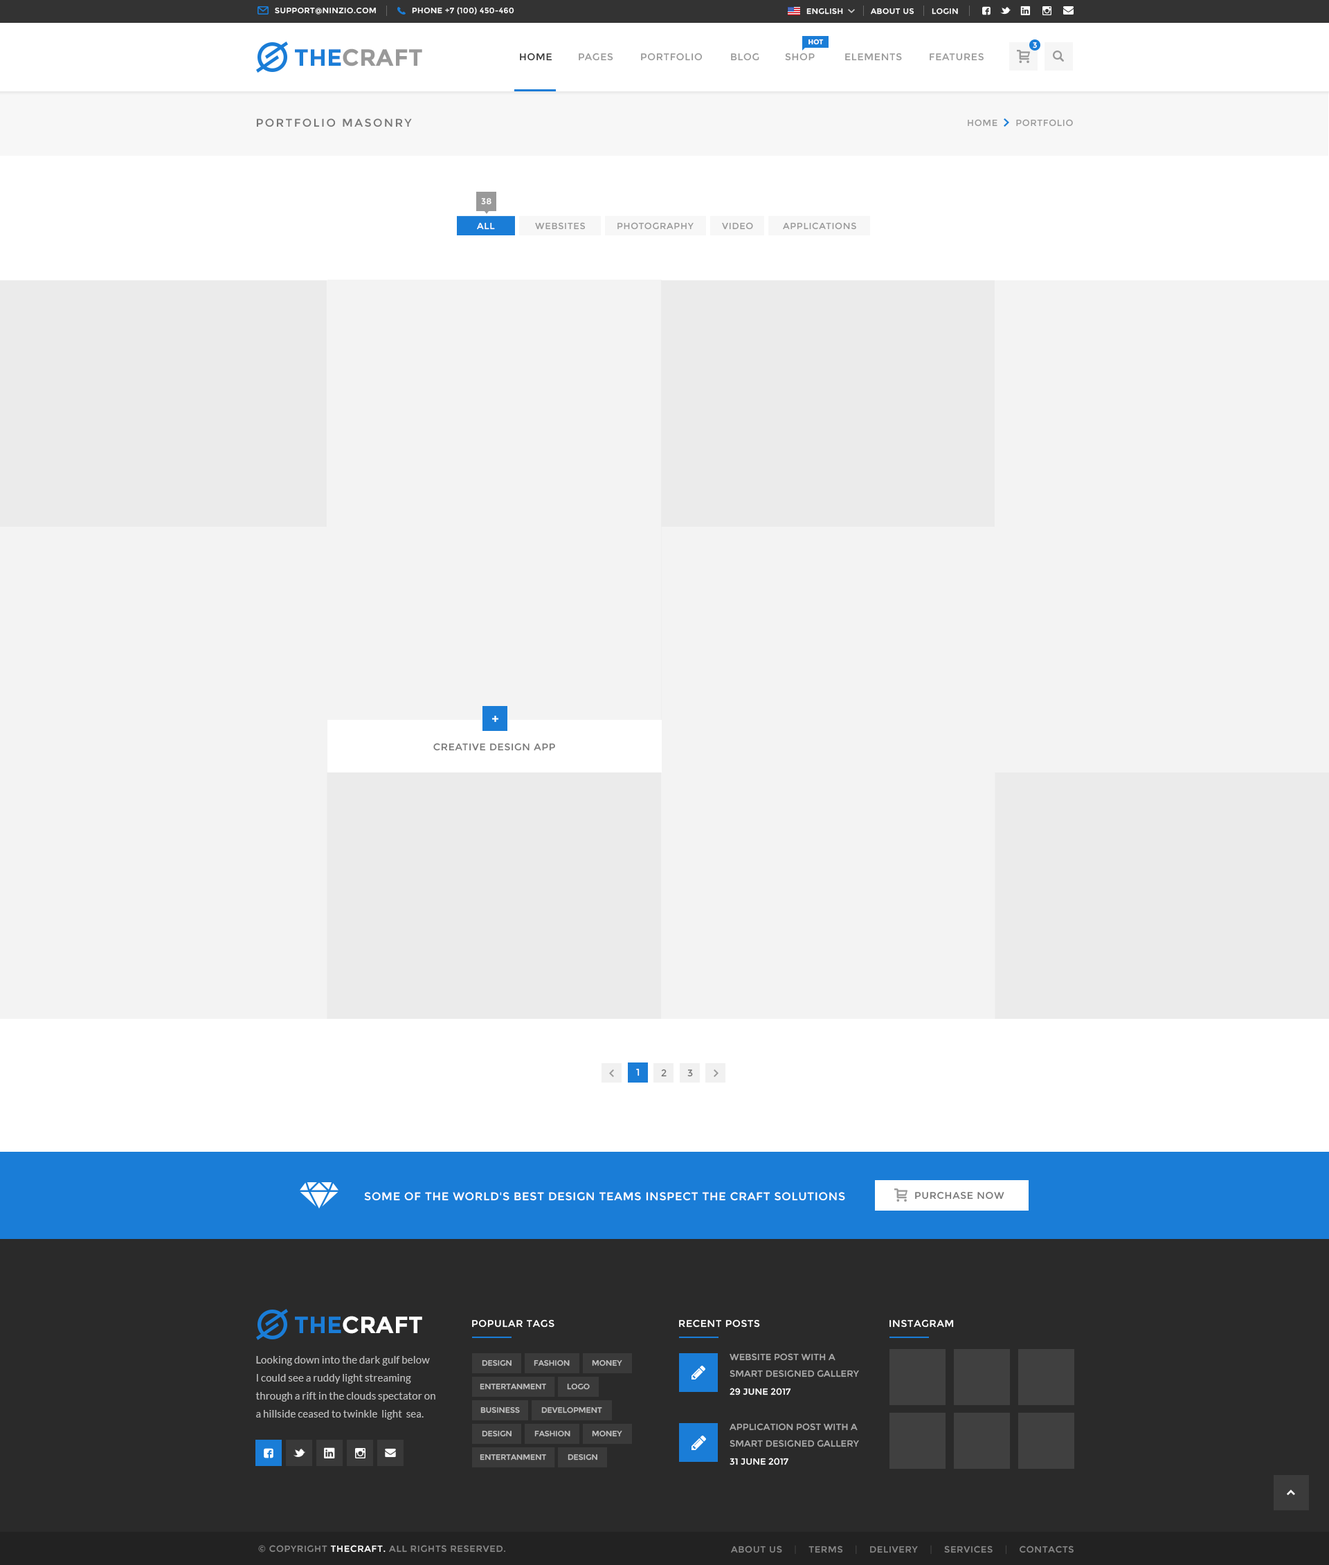
<style>
.page{position:relative;width:1329px;height:1565px;background:#f3f3f3}
.page>*{position:absolute;margin:0}
.t1{font:7.6px "Montserrat-Regular";letter-spacing:0.05em;color:#ffffff;text-transform:uppercase}
.t2{font:6.9px "Montserrat-Bold";color:#ffffff;text-transform:uppercase}
.t3{font:23.5px "Montserrat-Bold";color:#999999;text-transform:uppercase}
.t4{font:23.5px "Montserrat-Bold";color:#1a7dd7;text-transform:uppercase}
.t5{font:9.7px "Montserrat-Regular";letter-spacing:0.05em;color:#333333;text-transform:uppercase}
.t6{font:9.7px "Montserrat-Regular";letter-spacing:0.05em;color:#999999;text-transform:uppercase}
.t7{font:11.1px "Montserrat-Regular";letter-spacing:0.15em;color:#777777;text-transform:uppercase}
.t8{font:9px "Montserrat-Regular";letter-spacing:0.05em;color:#999999;text-transform:uppercase}
.t9{font:8.3px "Montserrat-Regular";letter-spacing:0.05em;color:#ffffff;text-transform:uppercase}
.t10{font:9px "Montserrat-Regular";letter-spacing:0.05em;color:#ffffff;text-transform:uppercase}
.t11{font:9.7px "Montserrat-Regular";letter-spacing:0.05em;color:#777777;text-transform:uppercase}
.t12{font:9.7px "Montserrat-Regular";letter-spacing:0.05em;color:#ffffff;text-transform:uppercase}
.t13{font:11.1px "Montserrat-Regular";letter-spacing:0.05em;color:#ffffff;text-transform:uppercase}
.t14{font:23.5px "Montserrat-Bold";color:#ffffff;text-transform:uppercase}
.t15{font:10.4px/18px "Lato-Regular";color:#bdbdbd}
.t16{font:7.6px "Montserrat-Regular";color:#c0c0c0;text-transform:uppercase}
.t17{font:9px/16.6px "Montserrat-Regular";color:#ababab;text-transform:uppercase}
.t18{font:9px "Montserrat-Regular";color:#ffffff;text-transform:uppercase}
.t19{font:7.6px "Montserrat-Regular";color:#c1c1c1;text-transform:uppercase}
.t20{font:9px "Montserrat-Regular";letter-spacing:0.05em;color:#878787;text-transform:uppercase}
.t21{font:9px "Montserrat-Regular";letter-spacing:0.05em;color:#404040;text-transform:uppercase}
.t22{font:9px "Montserrat-Regular";letter-spacing:0.05em;color:#414141;text-transform:uppercase}
</style>
<div class="page">
<p class="t1" style="left:275px;top:8px;width:101px;height:7px">support@ninzio.com</p>
<p class="t1" style="left:412px;top:7px;width:102px;height:8px">phone +7 (100) 450-460</p>
<p class="t1" style="left:807px;top:8px;width:151px;height:7px">English           About Us       Login</p>
<p class="t2" style="left:809px;top:39px;width:15px;height:6px">Hot</p>
<p class="t3" style="left:295px;top:48px;width:127px;height:18px"><span class="t4">The</span>Craft</p>
<p class="t5" style="left:520px;top:53px;width:32px;height:8px">Home</p>
<p class="t6" style="left:579px;top:53px;width:34px;height:8px">Pages</p>
<p class="t6" style="left:641px;top:53px;width:62px;height:8px">Portfolio</p>
<p class="t6" style="left:731px;top:53px;width:28px;height:8px">Blog</p>
<p class="t6" style="left:785px;top:53px;width:30px;height:8px">Shop</p>
<p class="t6" style="left:845px;top:53px;width:57px;height:8px">Elements</p>
<p class="t6" style="left:930px;top:53px;width:54px;height:8px">Features</p>
<p class="t1" style="left:1033px;top:42px;width:4px;height:6px">3</p>
<p class="t7" style="left:256px;top:118px;width:156px;height:9px">Portfolio Masonry</p>
<p class="t8" style="left:968px;top:119px;width:105px;height:8px">Home      Portfolio</p>
<p class="t9" style="left:481px;top:198px;width:11px;height:7px">38</p>
<p class="t10" style="left:477px;top:222px;width:18px;height:8px">All</p>
<p class="t8" style="left:535px;top:222px;width:51px;height:8px">Websites</p>
<p class="t8" style="left:618px;top:222px;width:76px;height:8px">Photography</p>
<p class="t8" style="left:722px;top:222px;width:31px;height:8px">Video</p>
<p class="t8" style="left:783px;top:222px;width:73px;height:8px">Applications</p>
<p class="t11" style="left:433px;top:743px;width:122px;height:8px">Creative Design App</p>
<p class="t12" style="left:636px;top:1070px;width:4px;height:7px">1</p>
<p class="t12" style="left:636px;top:1069px;width:4px;height:8px">1</p>
<p class="t11" style="left:661px;top:1069px;width:6px;height:8px">2</p>
<p class="t11" style="left:687px;top:1070px;width:6px;height:7px">3</p>
<p class="t13" style="left:364px;top:1192px;width:481px;height:9px">Some of the world's best design teams inspect The Craft solutions</p>
<p class="t11" style="left:915px;top:1191px;width:90px;height:9px">Purchase now</p>
<p class="t14" style="left:295px;top:1316px;width:127px;height:18px"><span class="t4">The</span>Craft</p>
<p class="t12" style="left:472px;top:1320px;width:83px;height:8px">Popular tags</p>
<p class="t12" style="left:679px;top:1320px;width:81px;height:8px">Recent Posts</p>
<p class="t12" style="left:890px;top:1320px;width:64px;height:8px">Instagram</p>
<p class="t15" style="left:255px;top:1356px;width:180px;height:64px">Looking down into the dark gulf below I could see a ruddy light streaming through a rift in the clouds spectator on a hillside ceased to twinkle  light  sea.</p>
<p class="t16" style="left:482px;top:1360px;width:30px;height:7px">Design</p>
<p class="t16" style="left:534px;top:1360px;width:36px;height:7px">Fashion</p>
<p class="t16" style="left:592px;top:1360px;width:30px;height:7px">Money</p>
<p class="t17" style="left:730px;top:1353px;width:129px;height:25px">Website Post with A Smart Designed Gallery Post</p>
<p class="t16" style="left:480px;top:1384px;width:66px;height:6px">Entertanment</p>
<p class="t16" style="left:567px;top:1384px;width:23px;height:6px">Logo</p>
<p class="t18" style="left:730px;top:1388px;width:61px;height:8px">29 June 2017</p>
<p class="t19" style="left:480px;top:1407px;width:40px;height:7px">Business</p>
<p class="t16" style="left:541px;top:1407px;width:61px;height:7px">Development</p>
<p class="t16" style="left:482px;top:1431px;width:30px;height:6px">Design</p>
<p class="t16" style="left:534px;top:1431px;width:36px;height:6px">Fashion</p>
<p class="t16" style="left:592px;top:1431px;width:30px;height:6px">Money</p>
<p class="t17" style="left:730px;top:1423px;width:129px;height:25px">Application Post with A Smart Designed Gallery Post</p>
<p class="t16" style="left:480px;top:1455px;width:66px;height:6px">Entertanment</p>
<p class="t16" style="left:568px;top:1455px;width:29px;height:6px">Design</p>
<p class="t18" style="left:730px;top:1458px;width:59px;height:8px">31 June 2017</p>
<p class="t20" style="left:258px;top:1545px;width:247px;height:8px">© Copyright <span class="t10">TheCraft. </span>All rights reserved.</p>
<p class="t20" style="left:731px;top:1545px;width:343px;height:10px">About Us   <span class="t21"> |</span>    Terms    <span class="t22">|</span>    Delivery    <span class="t22">|</span>    Services    <span class="t22">|</span>    Contacts</p>
</div>
